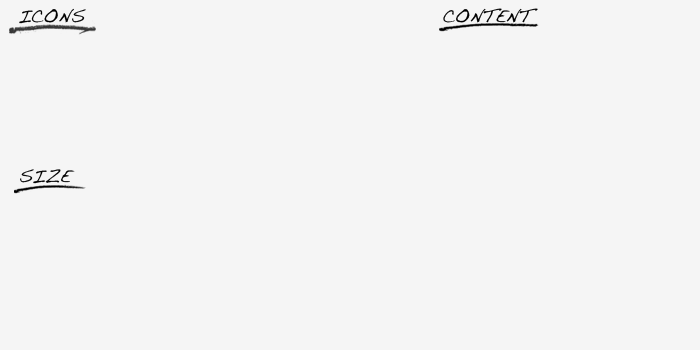
<style>
.page{position:relative;width:700px;height:350px;background:#f5f5f5}
.page>*{position:absolute;margin:0}
.t1{font:18px "Handwriting-Dakota";color:#000000}
</style>
<div class="page">
<p class="t1" style="left:19px;top:8px;width:67px;height:16px">ICONS</p>
<p class="t1" style="left:443px;top:8px;width:95px;height:15px">CONTENT</p>
<p class="t1" style="left:20px;top:169px;width:55px;height:15px">SIZE</p>
</div>
